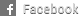
<style>
.page{position:relative;width:79px;height:16px;background:#ffffff}
.page>*{position:absolute;margin:0}
.t1{font:12px "Roboto-Regular";letter-spacing:0.04em;color:#d8d8d8}
</style>
<div class="page">
<p class="t1" style="left:23px;top:3px;width:56px;height:10px">Facebook</p>
</div>
